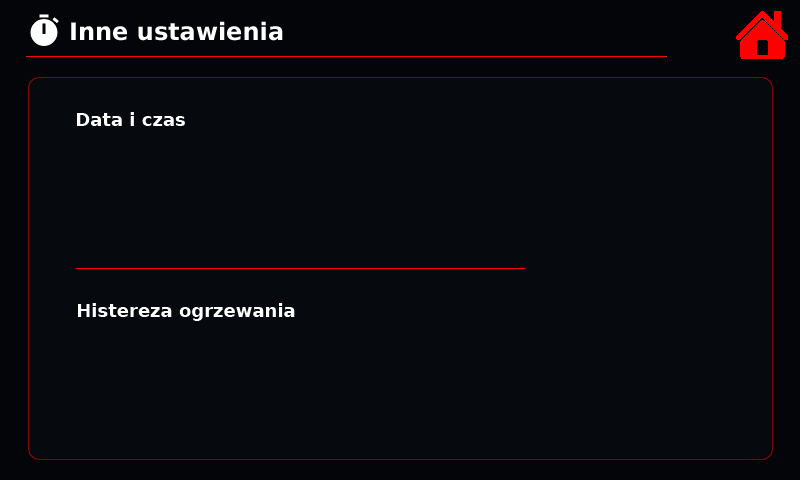
<style>
.page{position:relative;width:800px;height:480px;background:#06090d}
.page>*{position:absolute;margin:0}
.t1{font:24px "DejaVuSans-Bold";color:#ffffff}
.t2{font:18px "DejaVuSans-Bold";color:#ffffff}
</style>
<div class="page">
<p class="t1" style="left:71px;top:21px;width:212px;height:20px">Inne ustawienia</p>
<p class="t2" style="left:77px;top:112px;width:108px;height:14px">Data i czas</p>
<p class="t2" style="left:78px;top:303px;width:217px;height:18px">Histereza ogrzewania</p>
</div>
